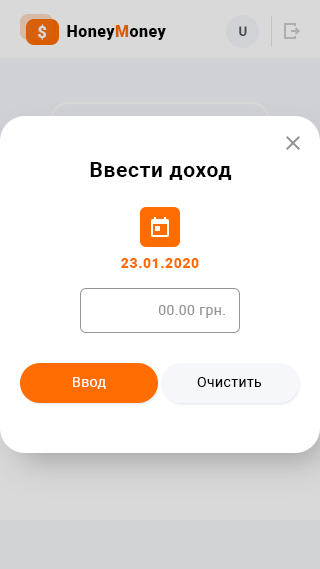
<style>
.page{position:relative;width:320px;height:569px;background:#ffffff}
.page>*{position:absolute;margin:0}
.t1{font:16px "Roboto-Black";letter-spacing:0.03em;color:#d9d9d9}
.t2{font:16px "Roboto-Black";letter-spacing:0.03em;color:#000000}
.t3{font:16px "Roboto-Black";letter-spacing:0.03em;color:#ff6c00}
.t4{font:13px "Roboto-Medium";letter-spacing:0.035em;color:#52555f}
.t5{font:21px "Roboto-Bold";letter-spacing:0.03em;color:#000000}
.t6{font:14px "Roboto-Black";letter-spacing:0.04em;color:#ff6c00}
.t7{font:14px "Roboto-Regular";letter-spacing:0.03em;color:#959595}
.t8{font:14px "Roboto-Regular";letter-spacing:0.03em;color:#ffffff}
.t9{font:14px "Roboto-Regular";letter-spacing:0.03em;color:#000000}
</style>
<div class="page">
<p class="t1" style="left:38px;top:24px;width:9px;height:16px">$</p>
<p class="t2" style="left:67px;top:25px;width:99px;height:15px">Honey<span class="t3">M</span>oney</p>
<p class="t4" style="left:239px;top:26px;width:8px;height:10px">U</p>
<p class="t5" style="left:90px;top:162px;width:142px;height:18px">Ввести доход</p>
<p class="t6" style="left:121px;top:258px;width:78px;height:10px">23.01.2020</p>
<p class="t7" style="left:158px;top:305px;width:67px;height:13px">00.00 грн.</p>
<p class="t8" style="left:73px;top:377px;width:33px;height:12px">Ввод</p>
<p class="t9" style="left:197px;top:377px;width:65px;height:10px">Очистить</p>
</div>
